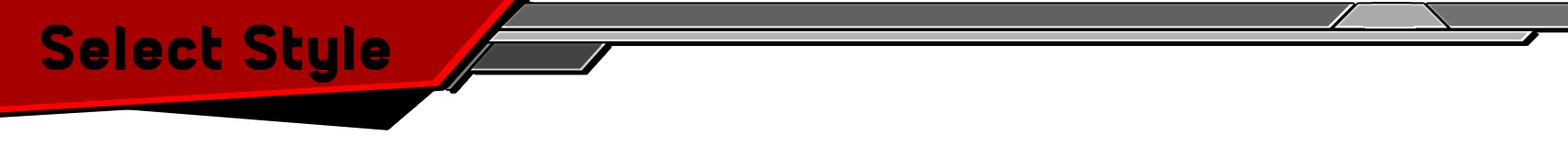
<style>
.page{position:relative;width:1568px;height:147px;background:#ffffff}
.page>*{position:absolute;margin:0}
.t1{font:66.1px "PiratesofCydonia";letter-spacing:0.05em;color:#000000}
</style>
<div class="page">
<p class="t1" style="left:41px;top:25px;width:349px;height:58px">Select Style</p>
</div>
